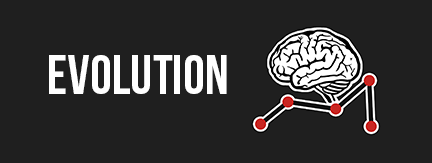
<style>
.page{position:relative;width:432px;height:163px;background:#1f1f1f}
.page>*{position:absolute;margin:0}
.t1{font:55.6px "BebasNeue";color:#ffffff}
</style>
<div class="page">
<p class="t1" style="left:49px;top:55px;width:178px;height:39px">Evolution</p>
</div>
